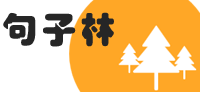
<style>
.page{position:relative;width:200px;height:92px;background:#ffa726}
.page>*{position:absolute;margin:0}
.t1{font:39px "¾­µäÔ²µþºÚ Regular";color:#262626}
</style>
<div class="page">
<p class="t1" style="left:3px;top:12px;width:111px;height:35px">句子林</p>
</div>
